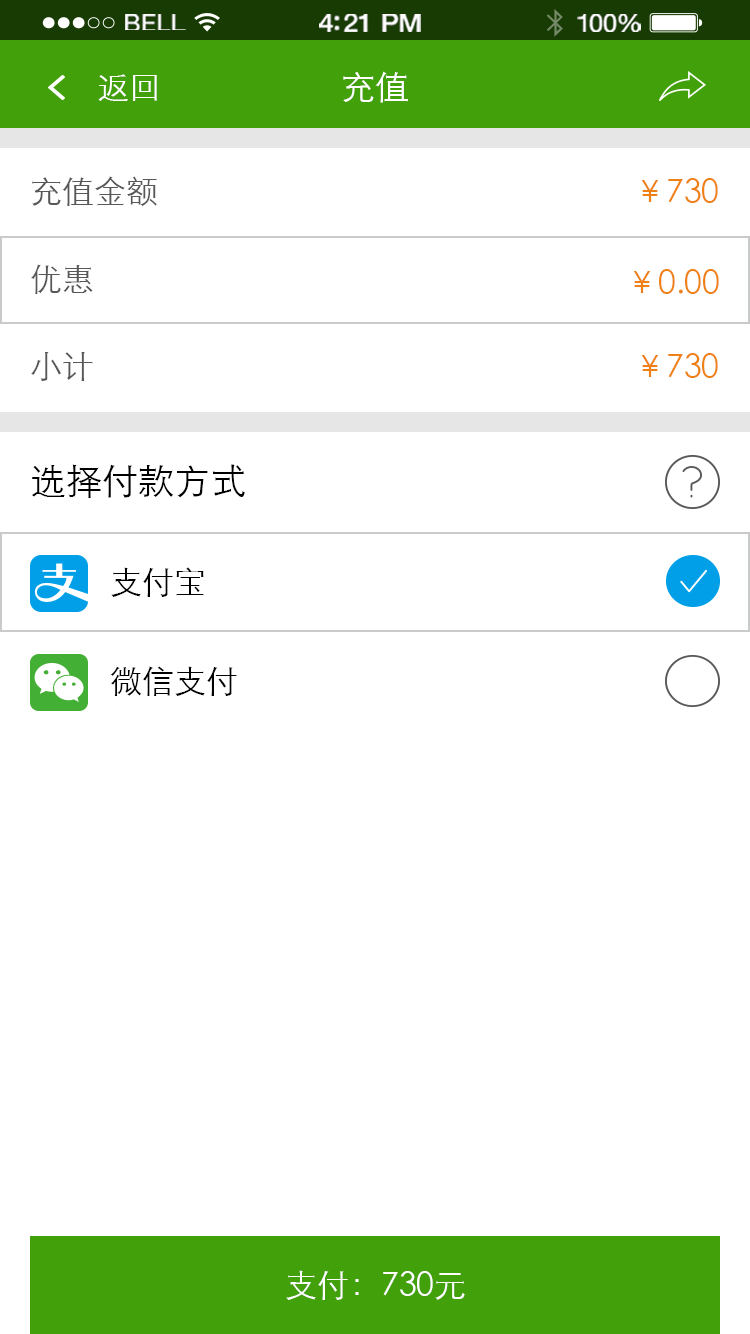
<style>
.page{position:relative;width:750px;height:1334px;background:#ffffff}
.page>*{position:absolute;margin:0}
.t1{font:23.3px "HelveticaNeue";letter-spacing:0.02em;color:#ffffff;scale:1.06 1}
.t2{font:25.3px "HelveticaNeue-Medium";letter-spacing:-0.02em;color:#ffffff;scale:1.06 1}
.t3{font:24.3px "HelveticaNeue";letter-spacing:-0.02em;color:#ffffff;scale:1.06 1}
.t4{font:32px "STXihei";color:#ffffff}
.t5{font:34px "STXihei";color:#ffffff}
.t6{font:32px "STXihei";color:#595757}
.t7{font:32px "STXihei";color:#ef8013}
.t8{font:36px "STXihei";color:#000000}
.t9{font:32px "STXihei";color:#000000}
</style>
<div class="page">
<p class="t1" style="left:125px;top:14px;width:61px;height:16px">BELL</p>
<p class="t2" style="left:319px;top:14px;width:102px;height:18px">4:21 PM</p>
<p class="t3" style="left:577px;top:14px;width:64px;height:18px">100%</p>
<p class="t4" style="left:98px;top:74px;width:59px;height:27px">返回</p>
<p class="t5" style="left:343px;top:71px;width:65px;height:32px">充值</p>
<p class="t6" style="left:32px;top:176px;width:125px;height:30px">充值金额</p>
<p class="t7" style="left:641px;top:178px;width:77px;height:25px">￥730</p>
<p class="t6" style="left:31px;top:264px;width:62px;height:30px">优惠</p>
<p class="t7" style="left:633px;top:269px;width:86px;height:25px">￥0.00</p>
<p class="t6" style="left:31px;top:352px;width:62px;height:29px">小计</p>
<p class="t7" style="left:641px;top:353px;width:77px;height:25px">￥730</p>
<p class="t8" style="left:32px;top:464px;width:213px;height:34px">选择付款方式</p>
<p class="t9" style="left:111px;top:567px;width:93px;height:30px">支付宝</p>
<p class="t9" style="left:111px;top:666px;width:126px;height:30px">微信支付</p>
<p class="t4" style="left:286px;top:1270px;width:179px;height:30px">支付：730元</p>
</div>
